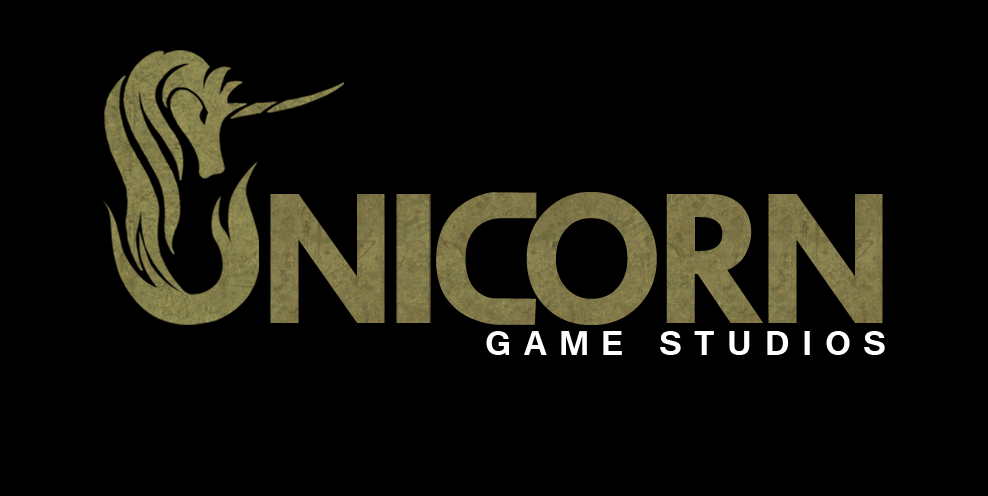
<style>
.page{position:relative;width:988px;height:496px;background:#000000}
.page>*{position:absolute;margin:0}
.t1{font:42.5px "Tunga-Bold";letter-spacing:0.3em;color:#fefefe}
</style>
<div class="page">
<p class="t1" style="left:486px;top:331px;width:399px;height:24px">GAME STUDIOS</p>
</div>
